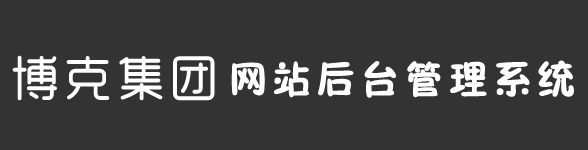
<style>
.page{position:relative;width:588px;height:150px;background:#333333}
.page>*{position:absolute;margin:0}
.t1{font:48px "RTWSYueRoudGoDemo-Regular";letter-spacing:0.075em;color:#ffffff;font-weight:bold}
.t2{font:40px "FZSEJW--GB1-0";letter-spacing:0.075em;color:#ffffff;font-weight:bold}
</style>
<div class="page">
<p class="t1" style="left:12px;top:55px;width:203px;height:46px">博克集团</p>
<p class="t2" style="left:231px;top:60px;width:343px;height:38px">网站后台管理系统</p>
</div>
